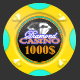
<style>
.page{position:relative;width:80px;height:80px;background:#333333}
.page>*{position:absolute;margin:0}
.t1{font:10.8px/3.6px "EdwardianScriptITC";color:#fda047}
.t2{font:6.3px/5.4px "Castellar";color:#fda047;scale:1.5 1}
.t3{font:10.6px "BernardMT-Condensed";color:#e19012;scale:1.22 1}
</style>
<div class="page">
<p class="t1" style="left:19px;top:30px;width:41px;height:14px;text-align:justify">Diamond<br><span class="t2">CASINO</span></p>
<p class="t3" style="left:25px;top:45px;width:31px;height:10px">1000$</p>
</div>
